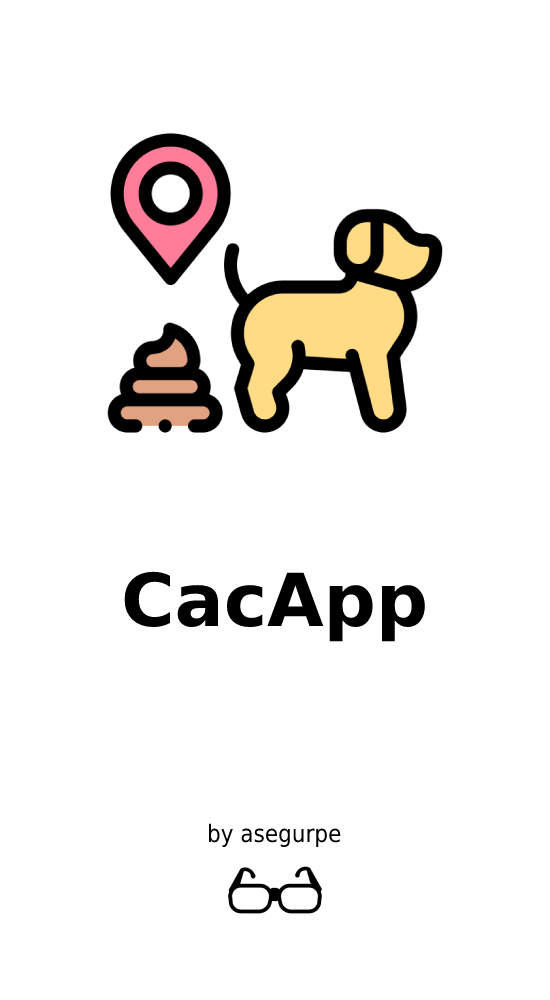
<style>
.page{position:relative;width:550px;height:1000px;background:#ffffff}
.page>*{position:absolute;margin:0}
.t1{font:73px "DejaVuSans-Bold";color:#000000}
.t2{font:24px "DejaVuSansCondensed";color:#000000}
</style>
<div class="page">
<p class="t1" style="left:124px;top:571px;width:301px;height:71px">CacApp</p>
<p class="t2" style="left:208px;top:823px;width:133px;height:24px">by asegurpe</p>
</div>
